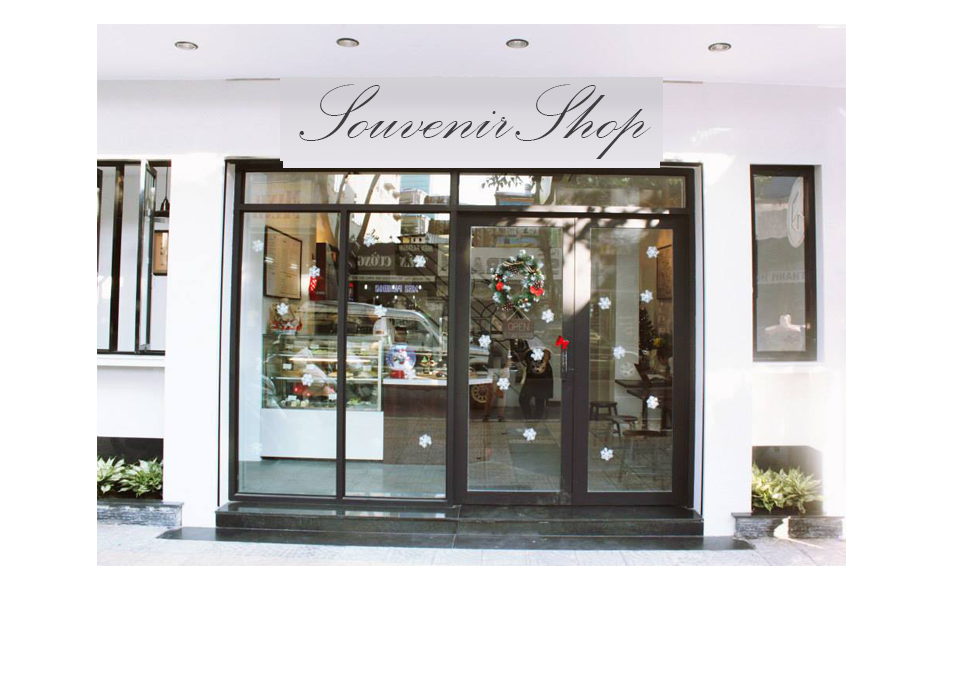
<style>
.page{position:relative;width:960px;height:694px;background:#ffffff}
.page>*{position:absolute;margin:0}
.t1{font:100px "PalaceScriptMT";color:#3f3d3d}
</style>
<div class="page">
<p class="t1" style="left:299px;top:84px;width:352px;height:75px">SouvenirShop</p>
</div>
